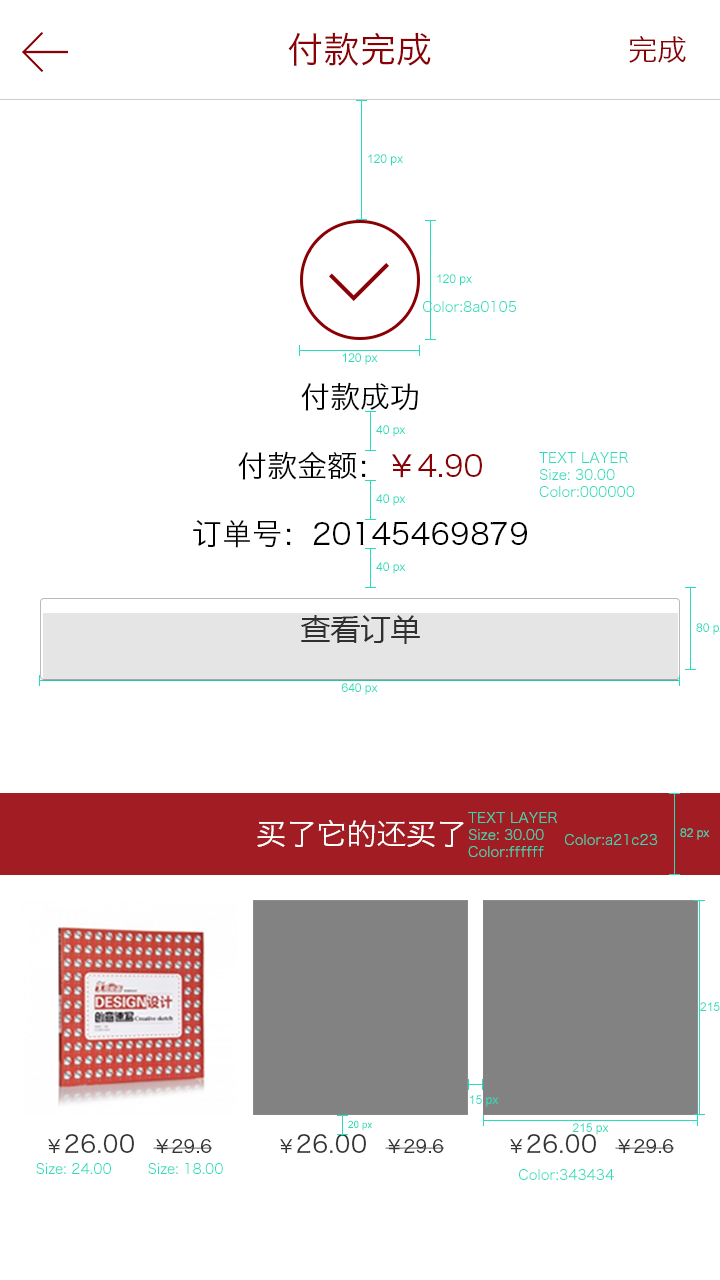
<style>
.page{position:relative;width:720px;height:1280px;background:#ffffff}
.page>*{position:absolute;margin:0}
.t1{font:36px "HiraginoSansGB-W3";color:#8a0105}
.t2{font:30px "HiraginoSansGB-W3";color:#8a0105}
.t3{font:12px "ArialMT";color:#28ddb9}
.t4{font:14px "HiraginoSansGB-W3";color:#28ddb9}
.t5{font:30px "HiraginoSansGB-W3";color:#000000}
.t6{font:30px "MicrosoftYaHei";color:#2f2f2f}
.t7{font:30px "HiraginoSansGB-W3";color:#ffffff}
.t8{font:10px "ArialMT";color:#28ddb9}
.t9{font:24px "HiraginoSansGB-W3";color:#343434}
.t10{font:18px "HiraginoSansGB-W3";color:#343434}
</style>
<div class="page">
<p class="t1" style="left:288px;top:32px;width:143px;height:34px">付款完成</p>
<p class="t2" style="left:629px;top:35px;width:57px;height:28px">完成</p>
<p class="t3" style="left:368px;top:154px;width:35px;height:12px">120 px</p>
<p class="t3" style="left:437px;top:274px;width:35px;height:12px">120 px</p>
<p class="t4" style="left:423px;top:301px;width:93px;height:11px">Color:8a0105</p>
<p class="t3" style="left:342px;top:353px;width:36px;height:12px">120 px</p>
<p class="t5" style="left:301px;top:382px;width:117px;height:29px">付款成功</p>
<p class="t3" style="left:376px;top:425px;width:30px;height:12px">40 px</p>
<p class="t5" style="left:238px;top:451px;width:244px;height:29px">付款金额：<span class="t2">￥4.90</span></p>
<p class="t4" style="left:539px;top:452px;width:96px;height:45px">TEXT LAYER<br>Size: 30.00<br>Color:000000</p>
<p class="t3" style="left:376px;top:494px;width:30px;height:12px">40 px</p>
<p class="t5" style="left:193px;top:520px;width:334px;height:28px">订单号：20145469879</p>
<p class="t3" style="left:376px;top:562px;width:30px;height:12px">40 px</p>
<p class="t6" style="left:300px;top:615px;width:120px;height:29px">查看订单</p>
<p class="t3" style="left:341px;top:683px;width:37px;height:12px">640 px</p>
<p class="t7" style="left:257px;top:819px;width:207px;height:28px">买了它的还买了</p>
<p class="t4" style="left:468px;top:812px;width:89px;height:45px">TEXT LAYER<br>Size: 30.00<br>Color:ffffff</p>
<p class="t3" style="left:680px;top:828px;width:30px;height:12px">82 px</p>
<p class="t4" style="left:565px;top:834px;width:92px;height:11px">Color:a21c23</p>
<p class="t3" style="left:470px;top:1095px;width:29px;height:12px">15 px</p>
<p class="t8" style="left:348px;top:1120px;width:24px;height:10px">20 px</p>
<p class="t9" style="left:48px;top:1134px;width:165px;height:20px"><span class="t10">￥</span>26.00  <span class="t10">￥29.6</span></p>
<p class="t9" style="left:280px;top:1134px;width:165px;height:20px"><span class="t10">￥</span>26.00  <span class="t10">￥29.6</span></p>
<p class="t9" style="left:510px;top:1134px;width:165px;height:20px"><span class="t10">￥</span>26.00  <span class="t10">￥29.6</span></p>
<p class="t3" style="left:572px;top:1123px;width:37px;height:12px">215 px</p>
<p class="t4" style="left:36px;top:1163px;width:75px;height:11px">Size: 24.00</p>
<p class="t4" style="left:148px;top:1163px;width:75px;height:11px">Size: 18.00</p>
<p class="t4" style="left:519px;top:1169px;width:95px;height:11px">Color:343434</p>
</div>
